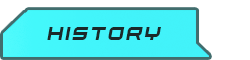
<style>
.page{position:relative;width:250px;height:60px;background:#ffffff}
.page>*{position:absolute;margin:0}
.t1{font:18px "UnitedKingdom";letter-spacing:0.13em;color:#1b2929;font-style:italic}
</style>
<div class="page">
<p class="t1" style="left:47px;top:27px;width:114px;height:13px">History</p>
</div>
